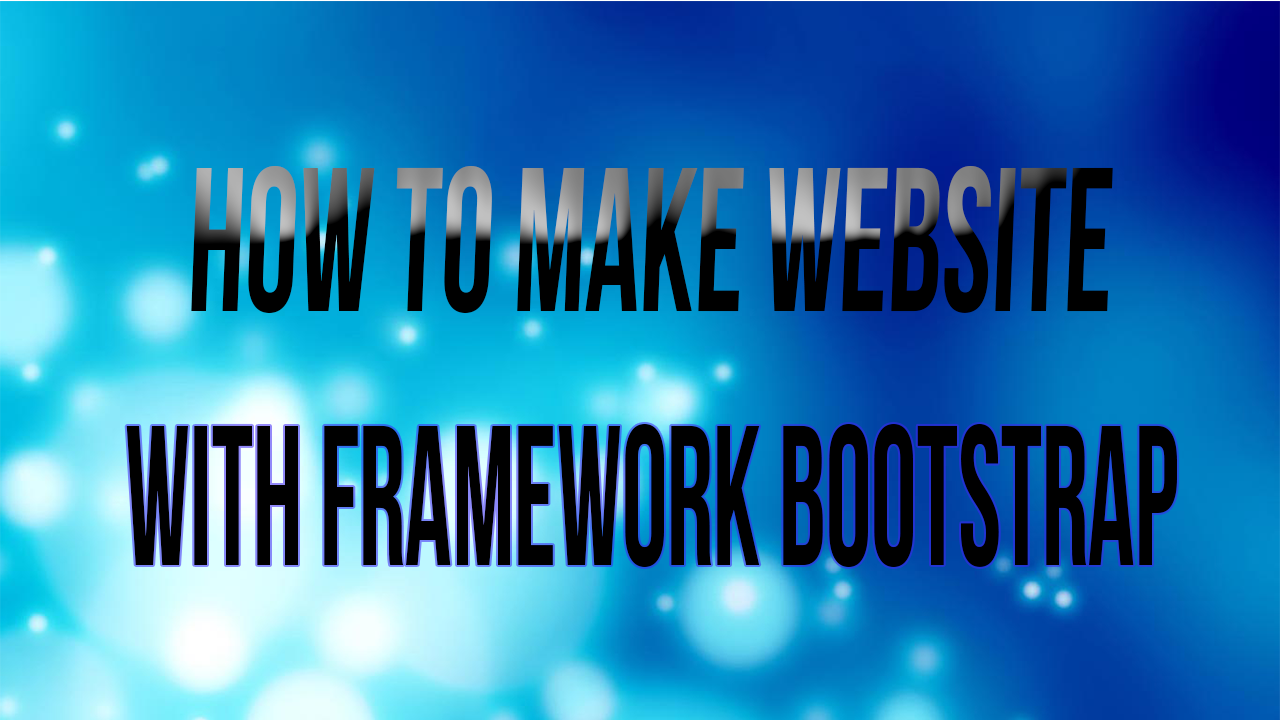
<style>
.page{position:relative;width:1280px;height:720px}
.page>*{position:absolute;margin:0}
.t1{font:204.2px "BebasNeue";scale:0.65 1}
.t2{font:199.2px "BebasNeue";color:#000000;scale:0.58 1}
</style>
<div class="page">
<p class="t1" style="left:191px;top:165px;width:922px;height:149px">How To make Website</p>
<p class="t2" style="left:126px;top:423px;width:1051px;height:144px">With FRAMEWORK bootstrap</p>
</div>
